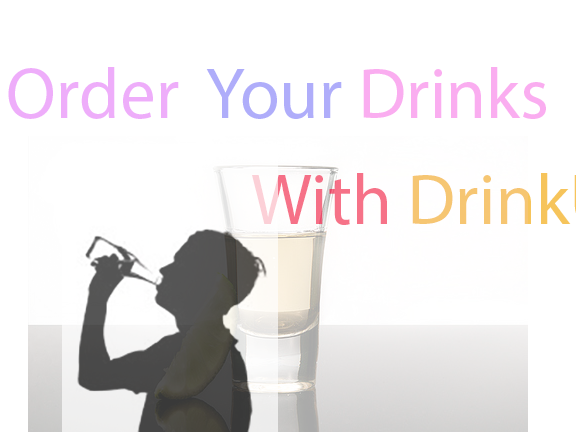
<style>
.page{position:relative;width:576px;height:432px;background:#ffffff}
.page>*{position:absolute;margin:0}
.t1{font:72px "MyriadPro-Regular";color:#eeadfa}
</style>
<div class="page">
<p class="t1" style="left:8px;top:67px;width:538px;height:52px">Order  Your Drinks</p>
</div>
